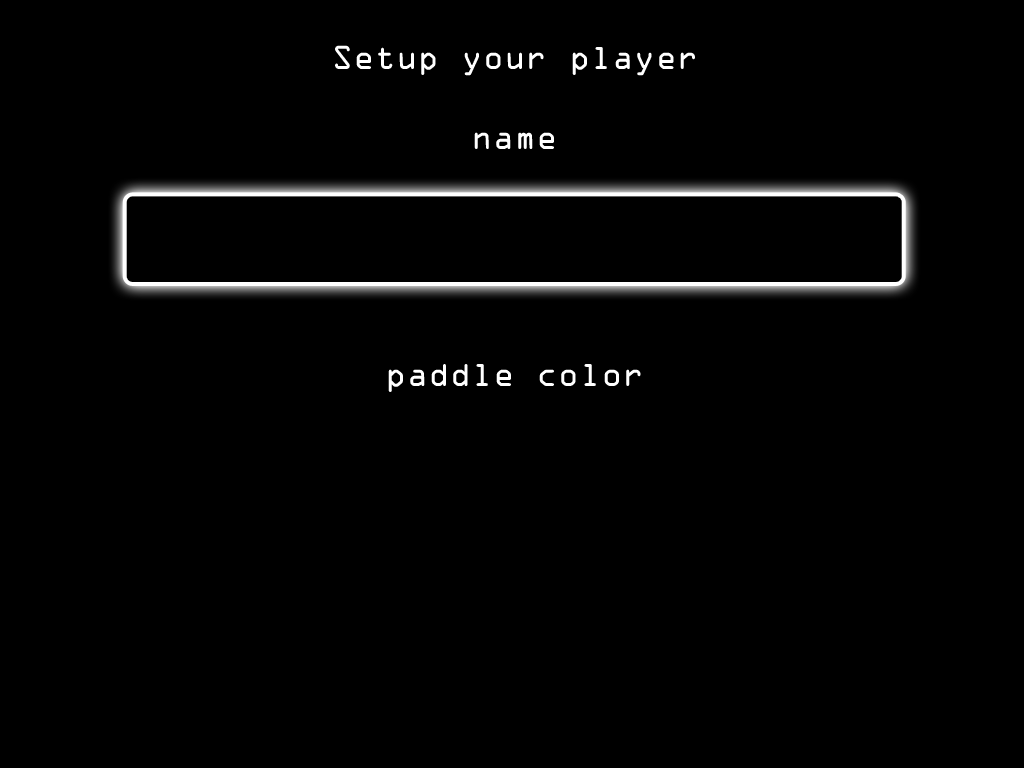
<style>
.page{position:relative;width:1024px;height:768px;background:#000000}
.page>*{position:absolute;margin:0}
.t1{font:30px "OCRAStd";color:#ffffff}
</style>
<div class="page">
<p class="t1" style="left:335px;top:45px;width:360px;height:31px">Setup your player</p>
<p class="t1" style="left:474px;top:132px;width:80px;height:17px">name</p>
<p class="t1" style="left:388px;top:364px;width:253px;height:28px">paddle color</p>
</div>
